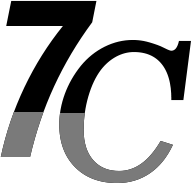
<style>
.page{position:relative;width:191px;height:183px;background:#ffffff}
.page>*{position:absolute;margin:0}
.t1{font:210px "Swiss721BT-BoldCondensedItalic";color:#000000}
.t2{font:190px "News701BT-ItalicA"}
</style>
<div class="page">
<p class="t1" style="left:0px;top:0px;width:97px;height:157px">7</p>
<p class="t2" style="left:59px;top:39px;width:132px;height:144px">C</p>
</div>
